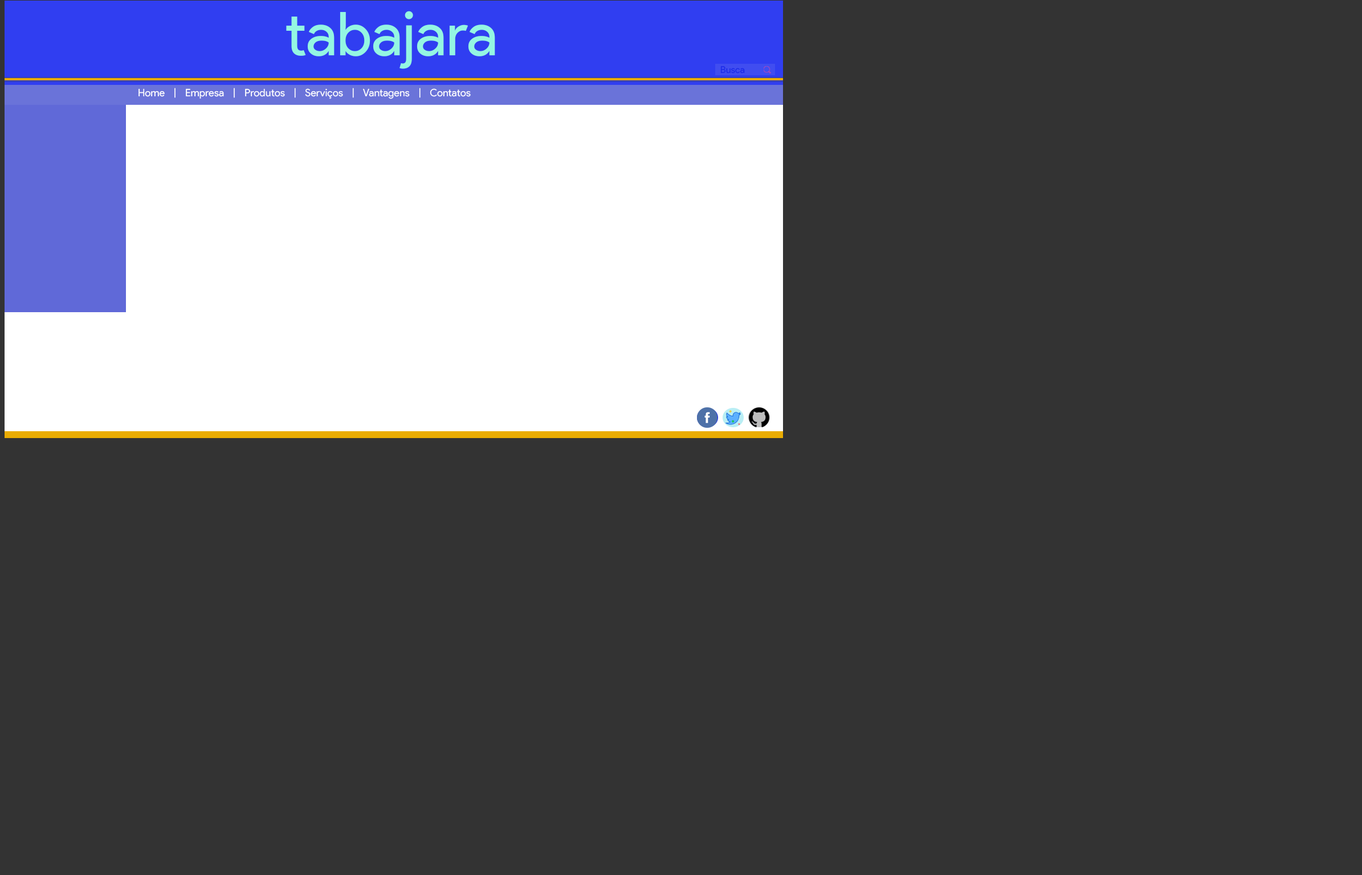
<style>
.page{position:relative;width:1362px;height:875px;background:#333333}
.page>*{position:absolute;margin:0}
.t1{font:60.3px "ProductSans-Regular";color:#94f6e2}
.t2{font:9.4px "ProductSans-Regular";color:#1a29e9}
.t3{font:10.3px "ProductSans-Regular";color:#ffffff}
</style>
<div class="page">
<p class="t1" style="left:286px;top:11px;width:209px;height:58px">tabajara</p>
<p class="t2" style="left:720px;top:66px;width:25px;height:8px">Busca</p>
<p class="t3" style="left:138px;top:88px;width:333px;height:11px">Home    |    Empresa    |    Produtos    |    Serviços    |    Vantagens    |    Contatos</p>
</div>
